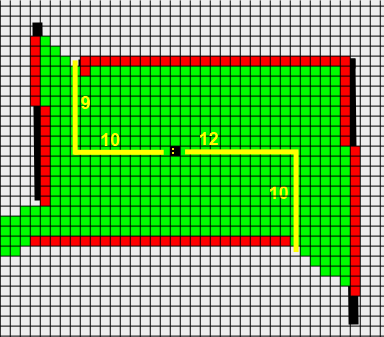
<style>
.page{position:relative;width:384px;height:337px;background:#eeeeee}
.page>*{position:absolute;margin:0}
.t1{font:18px "Arial-BoldMT";color:#ffff00}
</style>
<div class="page">
<p class="t1" style="left:81px;top:96px;width:9px;height:13px">9</p>
<p class="t1" style="left:101px;top:133px;width:19px;height:13px">10</p>
<p class="t1" style="left:200px;top:132px;width:18px;height:13px">12</p>
<p class="t1" style="left:270px;top:186px;width:18px;height:13px">10</p>
</div>
